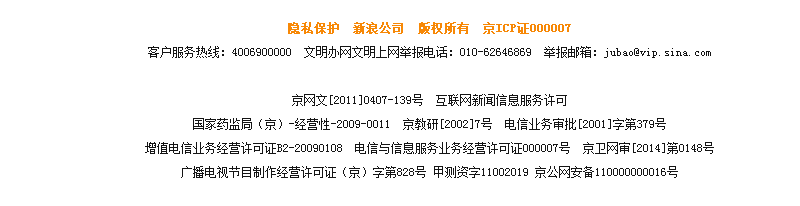
<style>
.page{position:relative;width:800px;height:206px;background:#ffffff}
.page>*{position:absolute;margin:0}
.t1{font:12px/24px "SimSun";color:#141414}
.t2{font:12px/24px "SimSun";color:#f78806;font-weight:bold}
</style>
<div class="page">
<p class="t1" style="left:145px;top:22px;width:569px;height:156px;text-align:center"><span class="t2">隐私保护　新浪公司　版权所有　京ICP证000007<br></span>客户服务热线：4006900000　文明办网文明上网举报电话：010-62646869　举报邮箱：jubao@vip.sina.com<br><br>京网文[2011]0407-139号　互联网新闻信息服务许可<br>国家药监局（京）-经营性-2009-0011　京教研[2002]7号　电信业务审批[2001]字第379号<br>增值电信业务经营许可证B2-20090108　电信与信息服务业务经营许可证000007号　京卫网审[2014]第0148号<br>广播电视节目制作经营许可证（京）字第828号 甲测资字11002019 京公网安备110000000016号</p>
</div>
